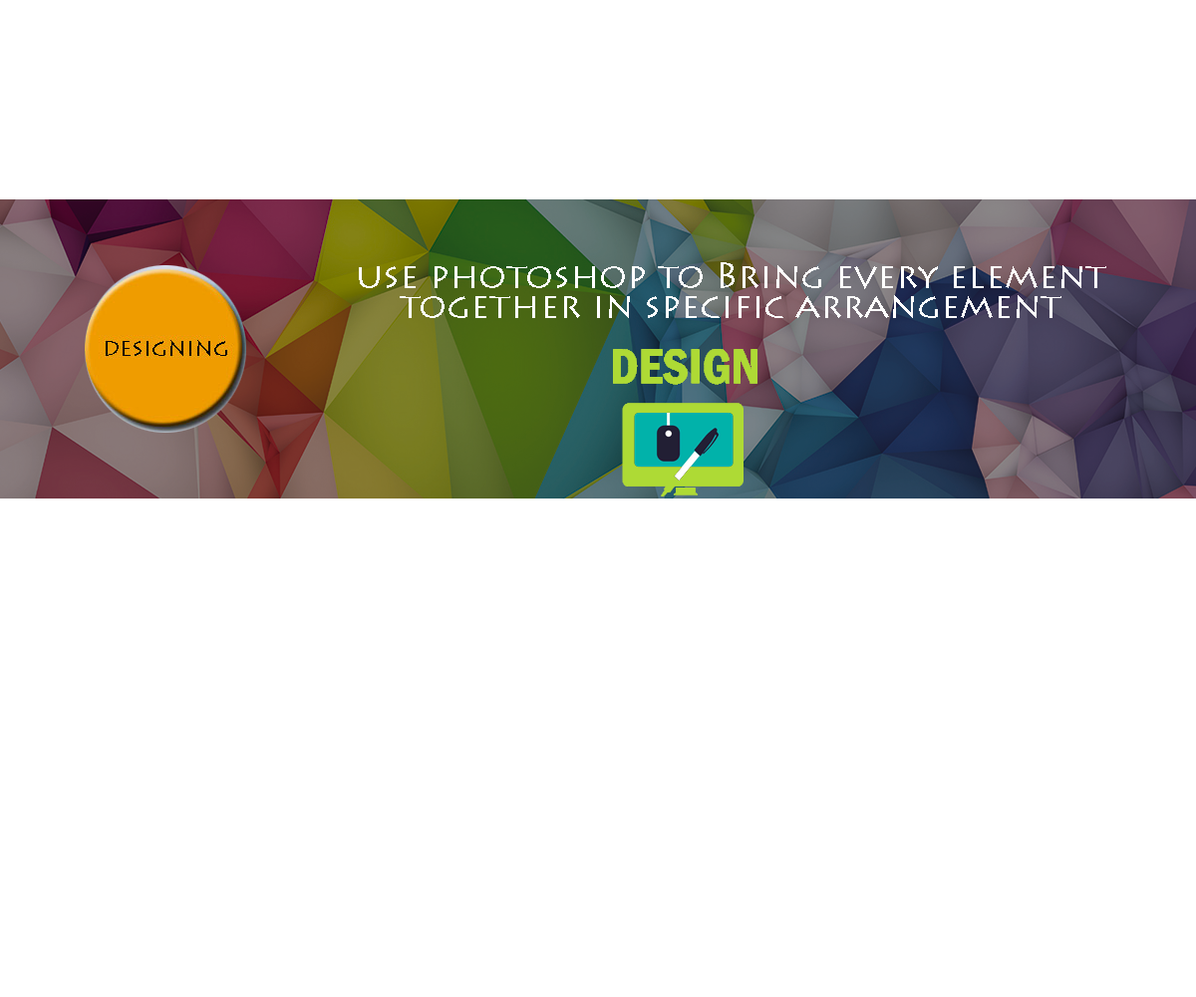
<style>
.page{position:relative;width:1196px;height:997px;background:#ffffff}
.page>*{position:absolute;margin:0}
.t1{font:35.9px/29.9px "LithosPro-Regular";color:#ffffff}
</style>
<div class="page">
<p class="t1" style="left:359px;top:262px;width:747px;height:56px;text-align:center">use photoshop to Bring every element<br>together in specific arrangement</p>
</div>
